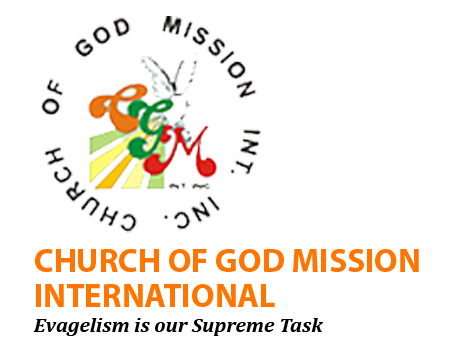
<style>
.page{position:relative;width:462px;height:350px;background:#ffffff}
.page>*{position:absolute;margin:0}
.t1{font:16.1px/35px "MyriadPro-Bold";color:#ff7500}
.t2{font:9.6px "Cambria-BoldItalic";color:#000000;scale:1.05 1}
</style>
<div class="page">
<p class="t1" style="left:35px;top:249px;width:384px;height:58px">CHURCH OF GOD MISSION<br>INTERNATIONAL</p>
<p class="t2" style="left:33px;top:318px;width:290px;height:18px">Evagelism is our Supreme Task</p>
</div>
